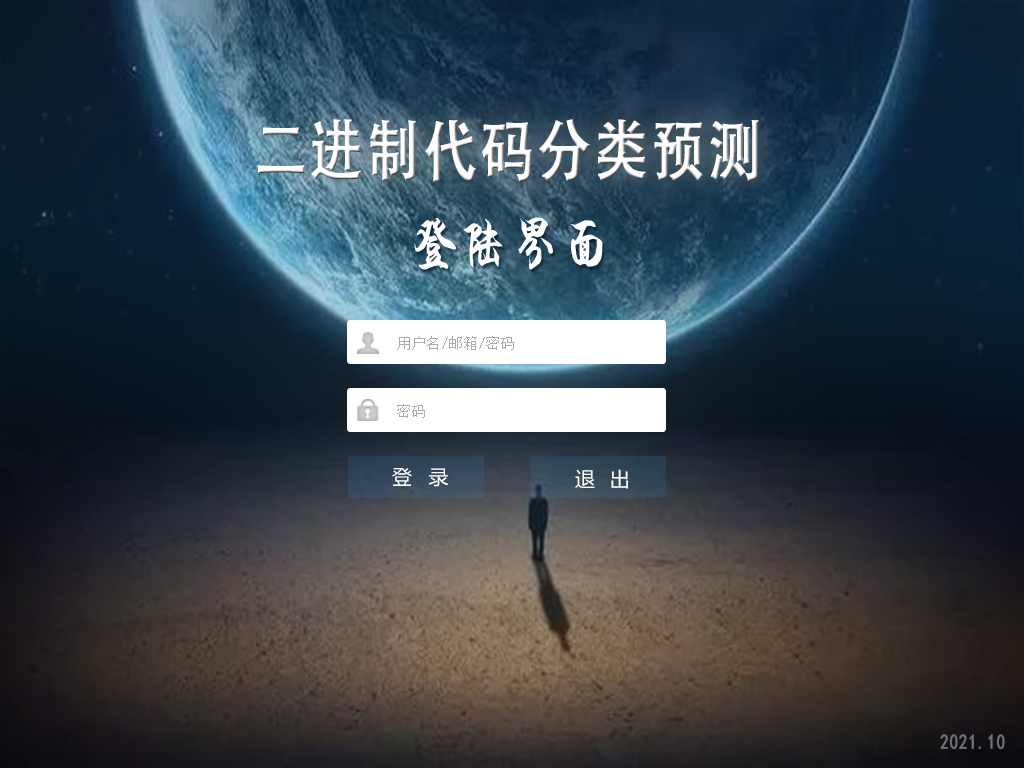
<style>
.page{position:relative;width:1024px;height:768px}
.page>*{position:absolute;margin:0}
.t1{font:66.7px "AdobeHeitiStd-Regular";letter-spacing:0.04em;color:#ffffff;font-weight:bold;scale:0.8 1}
.t2{font:61px "HYi4gj";letter-spacing:0.04em;color:#ffffff;scale:0.8 1}
.t3{font:14px "SimSun";letter-spacing:0.05em;color:#ababab}
.t4{font:20px "MicrosoftYaHei";letter-spacing:0.05em;color:#ffffff}
.t5{font:20.7px "SimHei";letter-spacing:0.04em;color:#6f7176;font-weight:bold;scale:0.8 1}
</style>
<div class="page">
<p class="t1" style="left:258px;top:119px;width:501px;height:63px">二进制代码分类预测</p>
<p class="t2" style="left:414px;top:217px;width:189px;height:53px">登陆界面</p>
<p class="t3" style="left:397px;top:336px;width:117px;height:14px">用户名/邮箱/密码</p>
<p class="t3" style="left:397px;top:404px;width:28px;height:14px">密码</p>
<p class="t4" style="left:392px;top:468px;width:57px;height:19px">登  录</p>
<p class="t4" style="left:575px;top:469px;width:53px;height:20px">退  出</p>
<p class="t5" style="left:940px;top:734px;width:65px;height:16px">2021.10</p>
</div>
